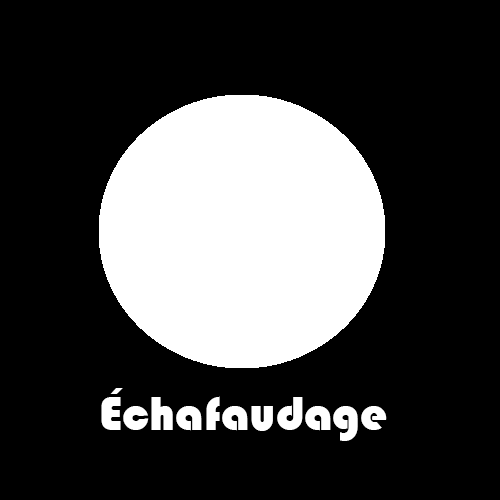
<style>
.page{position:relative;width:500px;height:500px;background:#000000}
.page>*{position:absolute;margin:0}
.t1{font:48.6px "Bauhaus93";color:#ffffff}
</style>
<div class="page">
<p class="t1" style="left:101px;top:388px;width:286px;height:53px">Échafaudage</p>
</div>
